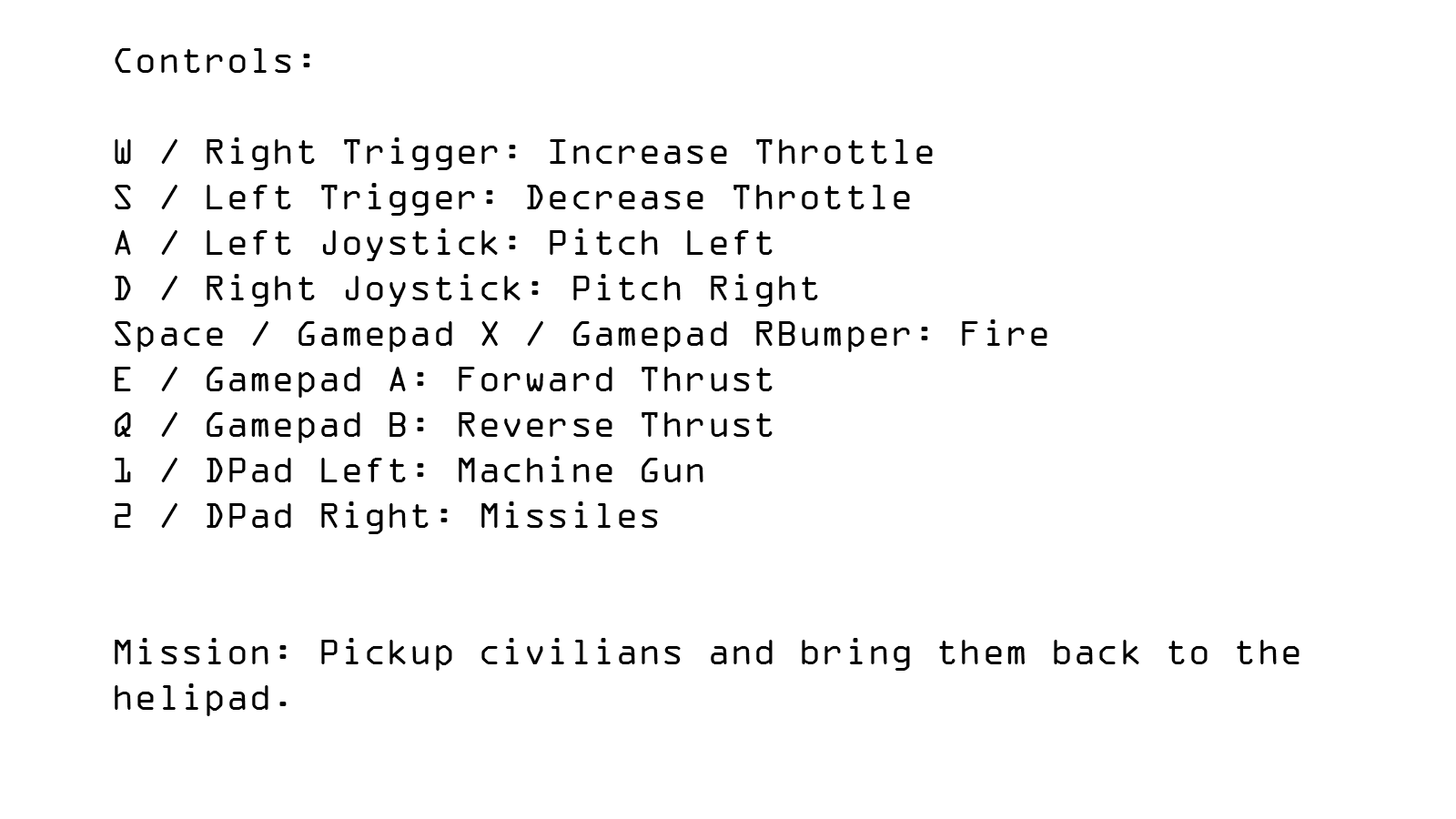
<style>
.page{position:relative;width:1456px;height:819px;background:#ffffff}
.page>*{position:absolute;margin:0}
.t1{font:37.9px "OCRAExtended";color:#000000}
</style>
<div class="page">
<p class="t1" style="left:115px;top:48px;width:1184px;height:668px">Controls:<br><br>W / Right Trigger: Increase Throttle<br>S / Left Trigger: Decrease Throttle<br>A / Left Joystick: Pitch Left<br>D / Right Joystick: Pitch Right<br>Space / Gamepad X / Gamepad RBumper: Fire<br>E / Gamepad A: Forward Thrust<br>Q / Gamepad B: Reverse Thrust<br>1 / DPad Left: Machine Gun<br>2 / DPad Right: Missiles<br><br><br>Mission: Pickup civilians and bring them back to the helipad.</p>
</div>
